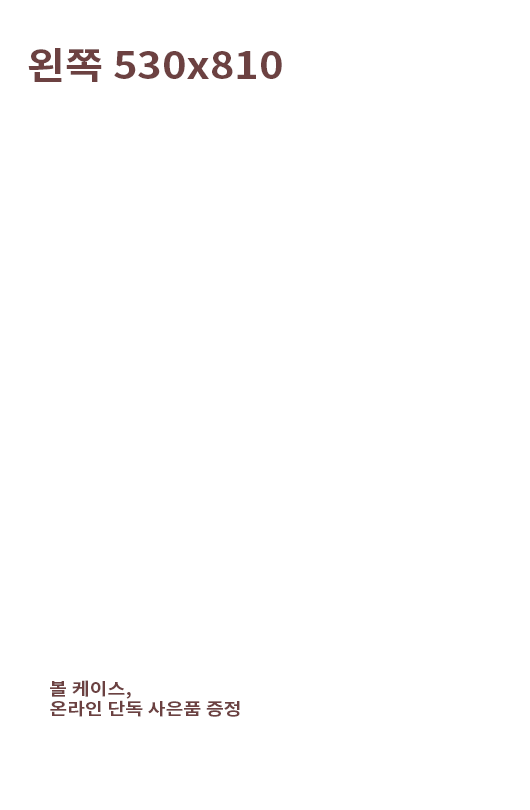
<style>
.page{position:relative;width:530px;height:810px;background:#ffffff}
.page>*{position:absolute;margin:0}
.t1{font:36.7px "NotoSansKR-Bold";color:#6c4141;scale:1.14 1}
.t2{font:17.1px/19.6px "NotoSansKR-Bold";color:#6c4141;scale:1.14 1}
</style>
<div class="page">
<p class="t1" style="left:28px;top:48px;width:254px;height:34px">왼쪽 530x810</p>
<p class="t2" style="left:50px;top:680px;width:190px;height:37px">볼 케이스,<br>온라인 단독 사은품 증정</p>
</div>
